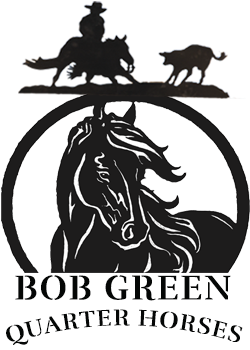
<style>
.page{position:relative;width:250px;height:350px;background:#ffffff}
.page>*{position:absolute;margin:0}
.t1{font:35.5px "Rufina-Stencil-Alt-01-Bold";letter-spacing:0.05em;color:#050706}
.t2{font:23.7px "Rufina-Stencil-Alt-01-Bold";letter-spacing:0.05em;color:#050706}
</style>
<div class="page">
<p class="t1" style="left:15px;top:275px;width:216px;height:26px">BOB GREEN</p>
<p class="t2" style="left:6px;top:309px;width:237px;height:36px">QUARTER HORSES</p>
</div>
